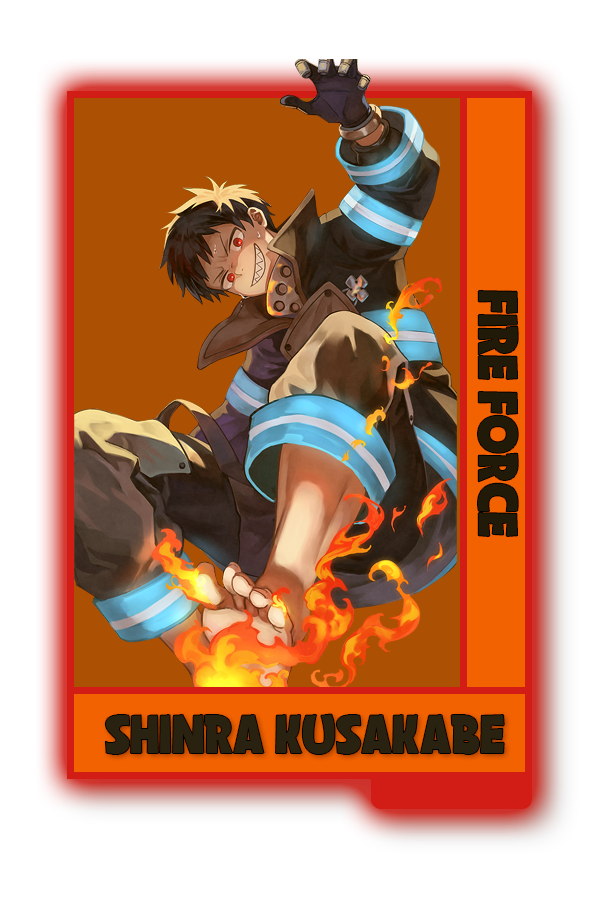
<style>
.page{position:relative;width:600px;height:900px;background:#ffffff}
.page>*{position:absolute;margin:0}
.t1{font:69.6px "AristonComicDemo-Regular";color:#1d1d1d}
.t2{font:69.1px "AristonComicDemo-Regular";color:#252525}
</style>
<div class="page">
<p class="t1" style="left:478px;top:291px;width:40px;height:245px;rotate:90deg">FIRE FORCE</p>
<p class="t2" style="left:105px;top:714px;width:399px;height:40px">SHINRA KUSAKABE</p>
</div>
